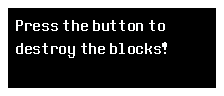
<style>
.page{position:relative;width:224px;height:96px;background:#000000}
.page>*{position:absolute;margin:0}
.t1{font:19.4px "DeterminationSansWeb";letter-spacing:0.01em;color:#feffff}
</style>
<div class="page">
<p class="t1" style="left:16px;top:20px;width:151px;height:38px">Press the button to <br>destroy the blocks!</p>
</div>
